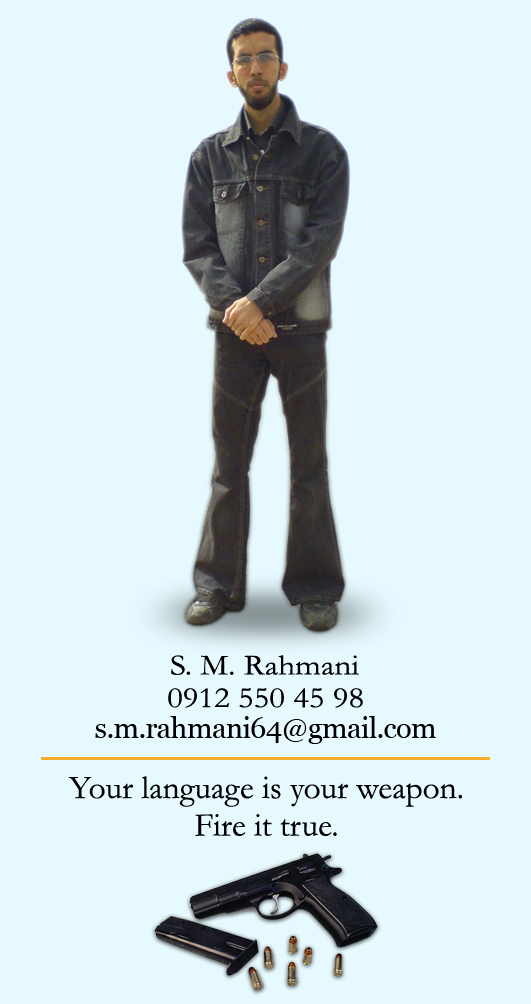
<style>
.page{position:relative;width:531px;height:1004px;background:#e6f9fe}
.page>*{position:absolute;margin:0}
.t1{font:29.4px "Garamond";color:#000000;scale:1.13 1}
.t2{font:29.2px "Georgia";letter-spacing:-0.025em;color:#000000}
.t3{font:33.3px/37.5px "Garamond";color:#000000}
</style>
<div class="page">
<p class="t1" style="left:171px;top:655px;width:188px;height:20px">S. M. Rahmani</p>
<p class="t1" style="left:168px;top:688px;width:195px;height:20px">0912 550 45 98</p>
<p class="t2" style="left:95px;top:716px;width:341px;height:28px">s.m.rahmani64@gmail.com</p>
<p class="t3" style="left:68px;top:776px;width:394px;height:60px;text-align:center">Your language is your weapon.<br>Fire it true.</p>
</div>
